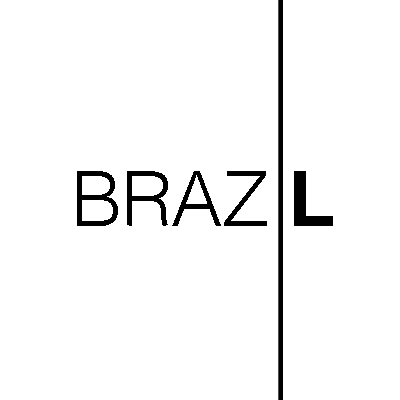
<style>
.page{position:relative;width:400px;height:400px;background:#ffffff}
.page>*{position:absolute;margin:0}
.t1{font:76.6px "Helvetica-Light";letter-spacing:-0.01em;color:#000000}
.t2{font:76.6px "Helvetica-Bold";letter-spacing:-0.01em;color:#000000}
</style>
<div class="page">
<p class="t1" style="left:77px;top:171px;width:256px;height:55px">BRAZ <span class="t2">L</span></p>
</div>
